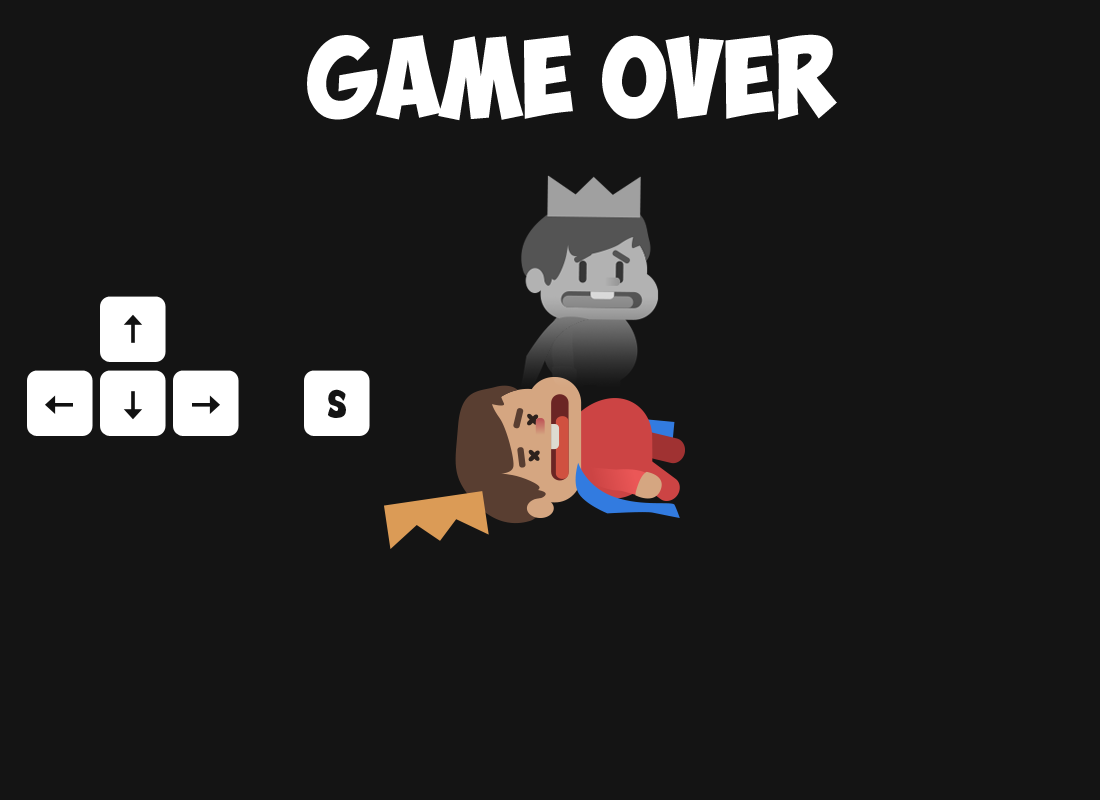
<style>
.page{position:relative;width:1100px;height:800px;background:#141414}
.page>*{position:absolute;margin:0}
.t1{font:80px "ObelixPro";color:#ffffff}
.t2{font:24px "Big_Bottom_Cartoon";color:#141414}
</style>
<div class="page">
<p class="t1" style="left:307px;top:34px;width:530px;height:87px">Game Over</p>
<p class="t2" style="left:328px;top:389px;width:18px;height:29px">S</p>
</div>
